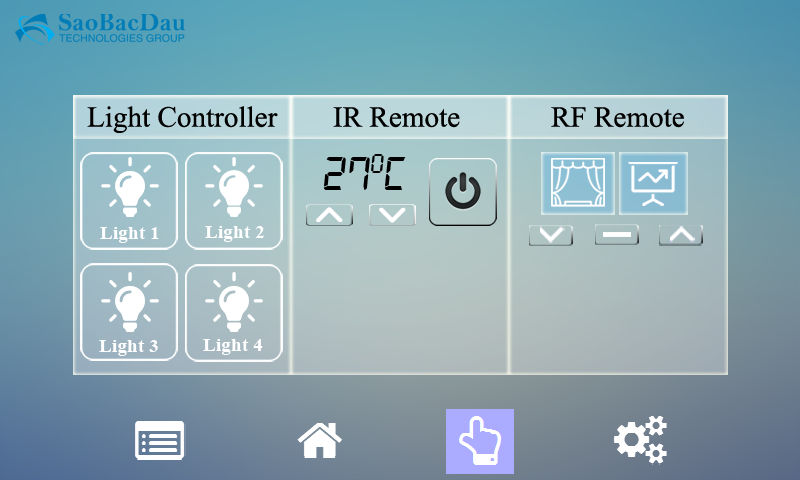
<style>
.page{position:relative;width:800px;height:480px}
.page>*{position:absolute;margin:0}
.t1{font:50px "TimesNewRomanPSMT";color:#000000}
.t2{font:50px "Digital-7Italic";color:#000000}
.t3{font:33.3px "TimesNewRomanPS-BoldMT";color:#ffffff}
</style>
<div class="page">
<p class="t1" style="left:87px;top:106px;width:191px;height:27px">Light Controller</p>
<p class="t1" style="left:333px;top:107px;width:127px;height:21px">IR Remote</p>
<p class="t1" style="left:551px;top:107px;width:133px;height:21px">RF Remote</p>
<p class="t2" style="left:323px;top:154px;width:83px;height:36px">27oC</p>
<p class="t3" style="left:100px;top:227px;width:59px;height:16px">Light 1</p>
<p class="t3" style="left:205px;top:226px;width:59px;height:16px">Light 2</p>
<p class="t3" style="left:99px;top:340px;width:59px;height:16px">Light 3</p>
<p class="t3" style="left:203px;top:339px;width:60px;height:16px">Light 4</p>
</div>
